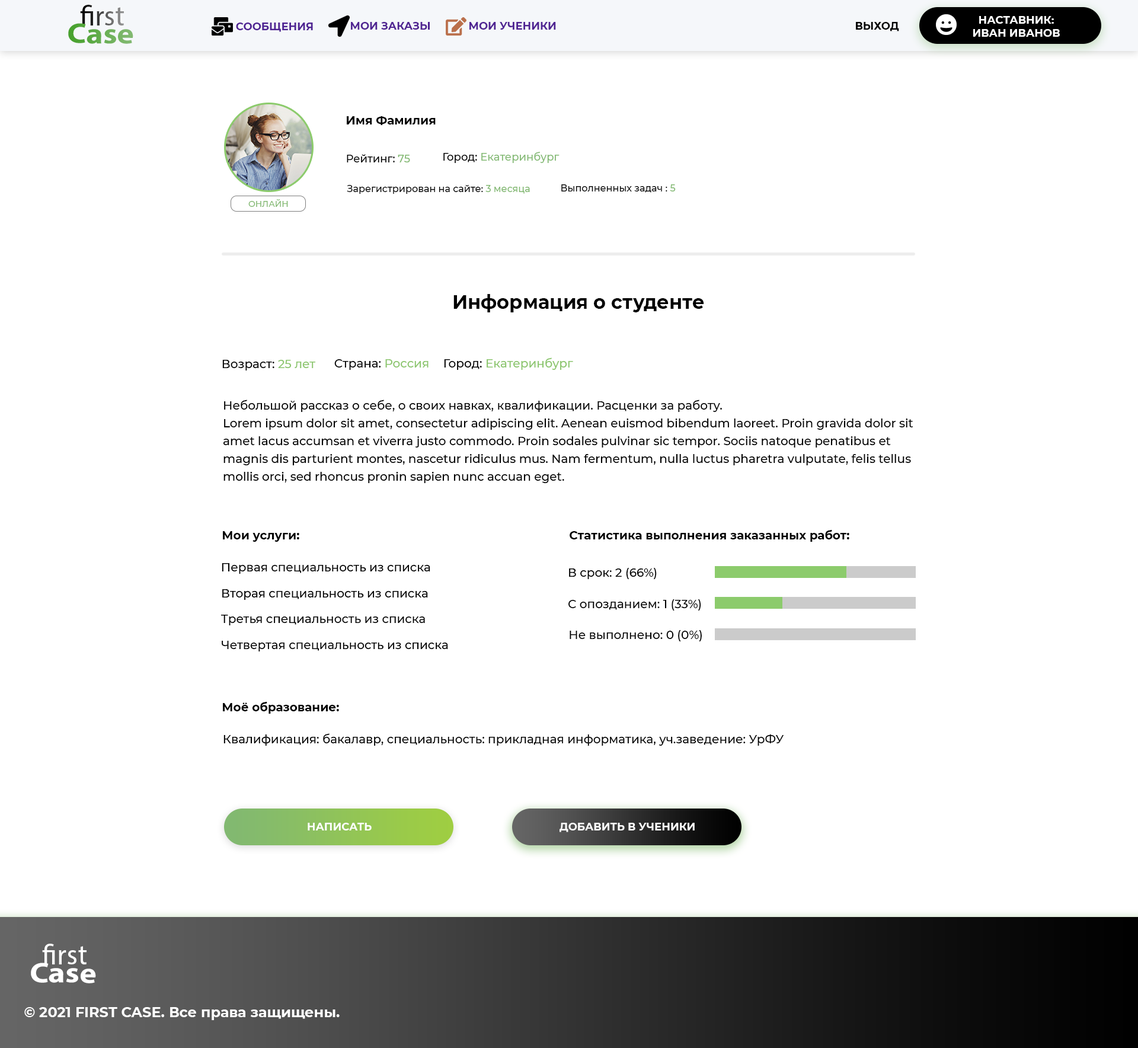
<style>
.page{position:relative;width:1138px;height:1048px;background:#ffffff}
.page>*{position:absolute;margin:0}
.t1{font:28.4px "MyriadPro-Regular"}
.t2{font:10.7px "Montserrat-Bold";color:#ffffff;text-transform:uppercase}
.t3{font:28.4px "MyriadPro-Bold";scale:1.13 1}
.t4{font:28.4px "MyriadPro-Regular";scale:1.13 1}
.t5{font:10.7px "Montserrat-Bold";color:#4f2492;text-transform:uppercase}
.t6{font:10.7px "Montserrat-Bold";color:#502492;text-transform:uppercase}
.t7{font:10.7px "Montserrat-Bold";color:#000000;text-transform:uppercase}
.t8{font:11.9px "Montserrat-Bold";color:#000000}
.t9{font:10.7px "Montserrat-Medium";color:#000000}
.t10{font:10.7px "Montserrat-Medium";color:#82b971}
.t11{font:10.7px "Montserrat-Medium";color:#85bb76}
.t12{font:9.5px "Montserrat-Medium";color:#000000}
.t13{font:9.5px "Montserrat-Medium";color:#82b971}
.t14{font:8.3px "Montserrat-Medium";color:#82b970}
.t15{font:19px "Montserrat-Bold";color:#000000}
.t16{font:11.9px "Montserrat-Medium";color:#000000}
.t17{font:11.9px "Montserrat-Medium";color:#8cc66e}
.t18{font:11.9px/17.8px "Montserrat-Medium";color:#000000}
.t19{font:28.5px "MyriadPro-Regular";color:#ffffff}
.t20{font:28.5px "MyriadPro-Bold";color:#ffffff;scale:1.13 1}
.t21{font:28.5px "MyriadPro-Regular";color:#ffffff;scale:1.13 1}
.t22{font:14.2px "Montserrat-Bold";color:#ffffff}
</style>
<div class="page">
<p class="t1" style="left:80px;top:5px;width:44px;height:20px">first</p>
<p class="t2" style="left:973px;top:16px;width:87px;height:21px;text-align:center">наставник:<br>иВАН иВАНОВ</p>
<p class="t3" style="left:68px;top:23px;width:65px;height:21px;rotate:1deg"><span class="t4">       </span>Case</p>
<p class="t5" style="left:236px;top:23px;width:77px;height:9px">СООБЩЕНИЯ</p>
<p class="t6" style="left:351px;top:22px;width:79px;height:8px">МОИ ЗАКАЗЫ</p>
<p class="t5" style="left:469px;top:22px;width:87px;height:8px">мои ученики</p>
<p class="t7" style="left:856px;top:22px;width:43px;height:9px">ВЫХОД</p>
<p class="t8" style="left:347px;top:116px;width:89px;height:9px">Имя Фамилия</p>
<p class="t9" style="left:347px;top:154px;width:63px;height:8px">Рейтинг: <span class="t10">75</span></p>
<p class="t11" style="left:443px;top:152px;width:116px;height:11px"><span class="t9">Город: </span>Екатеринбург</p>
<p class="t12" style="left:347px;top:185px;width:183px;height:9px">Зарегистрирован на сайте: <span class="t13">3 месяца</span></p>
<p class="t12" style="left:561px;top:184px;width:115px;height:9px">Выполненных задач : <span class="t13">5</span></p>
<p class="t14" style="left:248px;top:199px;width:40px;height:8px">ОНЛАЙН</p>
<p class="t15" style="left:453px;top:294px;width:251px;height:18px">Информация о студенте</p>
<p class="t16" style="left:222px;top:360px;width:94px;height:10px">Возраст: <span class="t17">25 лет</span></p>
<p class="t16" style="left:334px;top:359px;width:95px;height:11px">Страна: <span class="t17">Россия</span></p>
<p class="t17" style="left:444px;top:357px;width:129px;height:13px"><span class="t16">Город: </span>Екатеринбург</p>
<p class="t18" style="left:223px;top:399px;width:690px;height:84px">Небольшой рассказ о себе, о своих навках, квалификации. Расценки за работу.<br>Lorem ipsum dolor sit amet, consectetur adipiscing elit. Aenean euismod bibendum laoreet. Proin gravida dolor sit amet lacus accumsan et viverra justo commodo. Proin sodales pulvinar sic tempor. Sociis natoque penatibus et magnis dis parturient montes, nascetur ridiculus mus. Nam fermentum, nulla luctus pharetra vulputate, felis tellus mollis orci, sed rhoncus pronin sapien nunc accuan eget.</p>
<p class="t8" style="left:223px;top:531px;width:76px;height:11px">Мои услуги:</p>
<p class="t8" style="left:570px;top:530px;width:279px;height:12px">Статистика выполнения заказанных работ:</p>
<p class="t16" style="left:222px;top:563px;width:208px;height:11px">Первая специальность из списка</p>
<p class="t16" style="left:569px;top:568px;width:88px;height:11px">В срок: 2 (66%)</p>
<p class="t16" style="left:222px;top:589px;width:206px;height:11px">Вторая специальность из списка</p>
<p class="t16" style="left:568px;top:599px;width:133px;height:11px">С опозданием: 1 (33%)</p>
<p class="t16" style="left:220px;top:615px;width:205px;height:10px">Третья специальность из списка</p>
<p class="t16" style="left:222px;top:641px;width:226px;height:10px">Четвертая специальность из списка</p>
<p class="t16" style="left:570px;top:630px;width:132px;height:11px">Не выполнено: 0 (0%)</p>
<p class="t8" style="left:223px;top:702px;width:116px;height:12px">Моё образование:</p>
<p class="t16" style="left:223px;top:733px;width:561px;height:13px">Квалификация: бакалавр, специальность: прикладная информатика, уч.заведение: УрФУ</p>
<p class="t2" style="left:308px;top:823px;width:64px;height:7px">написать</p>
<p class="t2" style="left:559px;top:823px;width:136px;height:9px">добавить в ученики</p>
<p class="t19" style="left:42px;top:944px;width:45px;height:20px">first</p>
<p class="t20" style="left:31px;top:963px;width:65px;height:20px;rotate:1deg"><span class="t21">       </span>Case</p>
<p class="t22" style="left:24px;top:1007px;width:316px;height:13px">© 2021 FIRST CASE. Все права защищены.</p>
</div>
